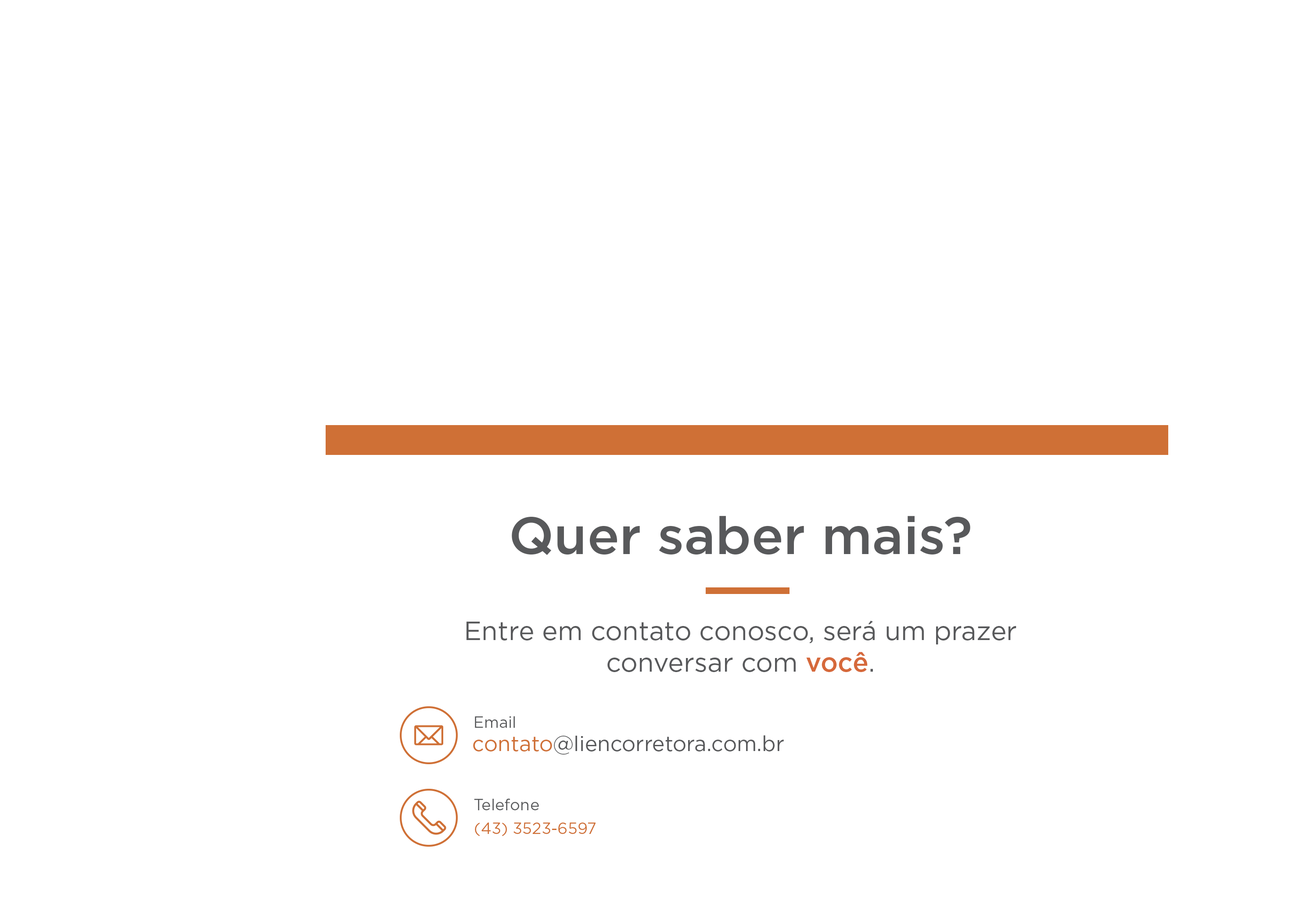
<style>
.page{position:relative;width:1292px;height:923px;background:#ffffff}
.page>*{position:absolute;margin:0}
.t1{font:52.7px "Gotham-Medium";color:#58595b}
.t2{font:26.3px "Gotham-Book";color:#58595b}
.t3{font:26.3px "Gotham-Medium";color:#d6693b}
.t4{font:15.8px "Gotham-Book";color:#58595b}
.t5{font:21.1px "Gotham-Book";color:#58595b}
.t6{font:21.1px "Gotham-Book";color:#cf7036}
.t7{font:15.8px "Gotham-Book";color:#cf7036}
</style>
<div class="page">
<p class="t1" style="left:512px;top:516px;width:458px;height:39px">Quer saber mais?</p>
<p class="t2" style="left:466px;top:620px;width:550px;height:52px;text-align:center">Entre em contato conosco, será um prazer conversar com <span class="t3">você</span>.</p>
<p class="t4" style="left:475px;top:716px;width:40px;height:12px">Email</p>
<p class="t5" style="left:473px;top:735px;width:311px;height:20px"><span class="t6">contato</span>@liencorretora.com.br</p>
<p class="t4" style="left:474px;top:799px;width:65px;height:11px">Telefone</p>
<p class="t7" style="left:475px;top:823px;width:120px;height:13px">(43) 3523-6597</p>
</div>
